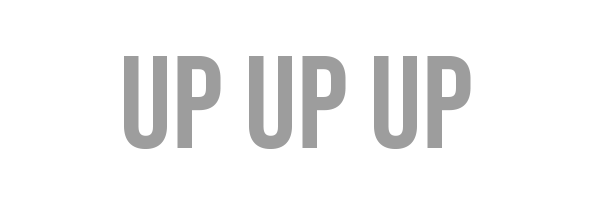
<style>
.page{position:relative;width:594px;height:204px;background:#ffffff}
.page>*{position:absolute;margin:0}
.t1{font:131.8px "BebasNeue-Regular";color:#9d9d9d}
</style>
<div class="page">
<p class="t1" style="left:124px;top:56px;width:347px;height:94px">up up up</p>
</div>
